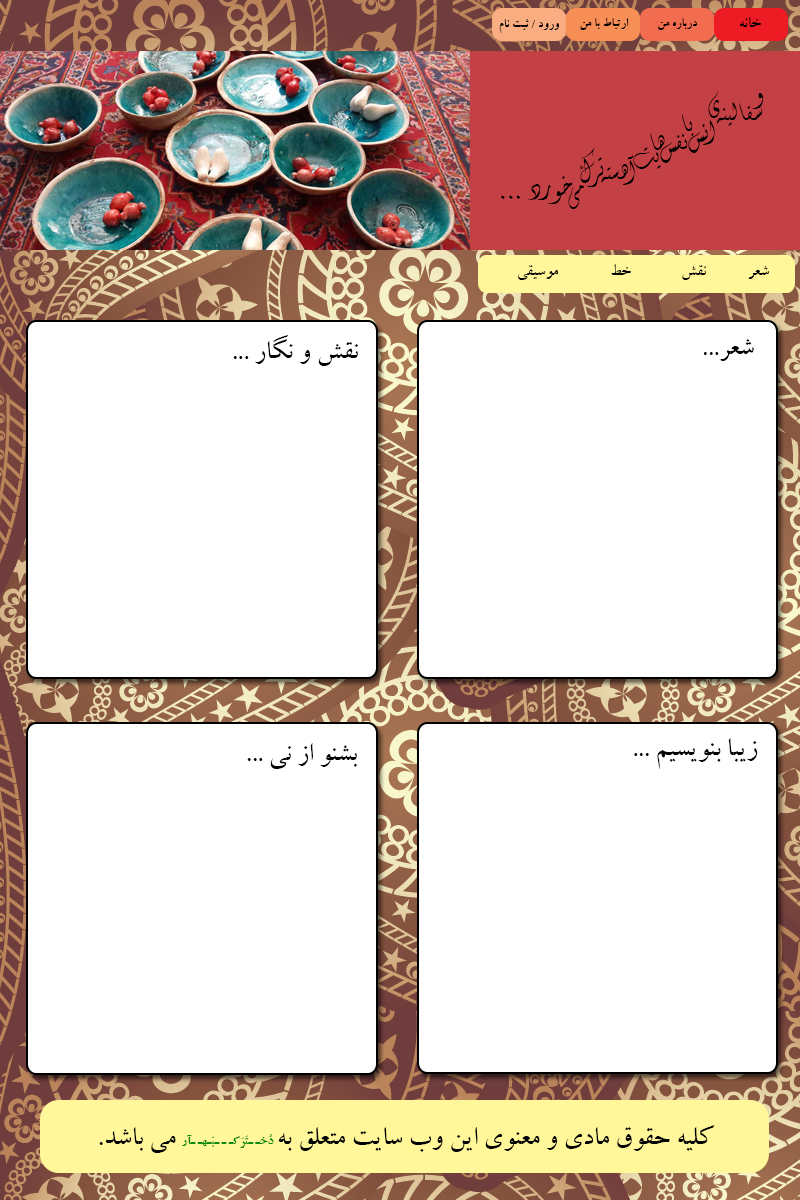
<style>
.page{position:relative;width:800px;height:1200px;background:#ffffff}
.page>*{position:absolute;margin:0}
.t1{font:18px "Zar";color:#000000}
.t2{font:14px "Zar";color:#000000}
.t3{font:30px "Fantezy";color:#000000}
.t4{font:30px "Zar";color:#000000}
.t5{font:29.8px "Zar";color:#000000}
.t6{font:12px "ZarBold";color:#098b0c}
</style>
<div class="page">
<p class="t1" style="left:740px;top:17px;width:21px;height:10px">خانه</p>
<p class="t2" style="left:499px;top:19px;width:60px;height:14px">ورود / ثبت نام</p>
<p class="t2" style="left:580px;top:18px;width:49px;height:12px">ارتباط با من</p>
<p class="t2" style="left:658px;top:18px;width:39px;height:12px">درباره من</p>
<p class="t3" style="left:708px;top:91px;width:12px;height:27px">ی</p>
<p class="t3" style="left:717px;top:102px;width:46px;height:24px">سفالینه</p>
<p class="t3" style="left:751px;top:93px;width:13px;height:16px">و</p>
<p class="t3" style="left:682px;top:114px;width:12px;height:22px">با</p>
<p class="t3" style="left:688px;top:120px;width:27px;height:33px">انس</p>
<p class="t3" style="left:650px;top:133px;width:15px;height:17px">ها</p>
<p class="t3" style="left:660px;top:134px;width:28px;height:29px">نفس</p>
<p class="t3" style="left:580px;top:148px;width:24px;height:39px">ترک</p>
<p class="t3" style="left:633px;top:147px;width:28px;height:22px">یت</p>
<p class="t3" style="left:601px;top:155px;width:34px;height:30px">آهسته</p>
<p class="t3" style="left:528px;top:176px;width:45px;height:28px">خورد</p>
<p class="t3" style="left:568px;top:185px;width:16px;height:24px">می</p>
<p class="t3" style="left:501px;top:195px;width:20px;height:4px">...</p>
<p class="t1" style="left:518px;top:265px;width:41px;height:15px">موسیقی</p>
<p class="t1" style="left:611px;top:264px;width:20px;height:11px">خط</p>
<p class="t1" style="left:682px;top:265px;width:24px;height:15px">نقش</p>
<p class="t1" style="left:748px;top:266px;width:21px;height:13px">شعر</p>
<p class="t4" style="left:233px;top:335px;width:126px;height:31px">نقش و نگار ...</p>
<p class="t5" style="left:703px;top:339px;width:51px;height:22px">شعر...</p>
<p class="t4" style="left:247px;top:743px;width:110px;height:26px">بشنو از نی ...</p>
<p class="t4" style="left:634px;top:738px;width:124px;height:31px">زیبا بنویسیم ...</p>
<p class="t4" style="left:99px;top:1125px;width:616px;height:28px">کلیه حقوق مادی و معنوی این وب سایت متعلق به<span class="t6"> دُخـ ـتَرَکـ ـ ـبَـهـ ـآر</span> می باشد.</p>
</div>
